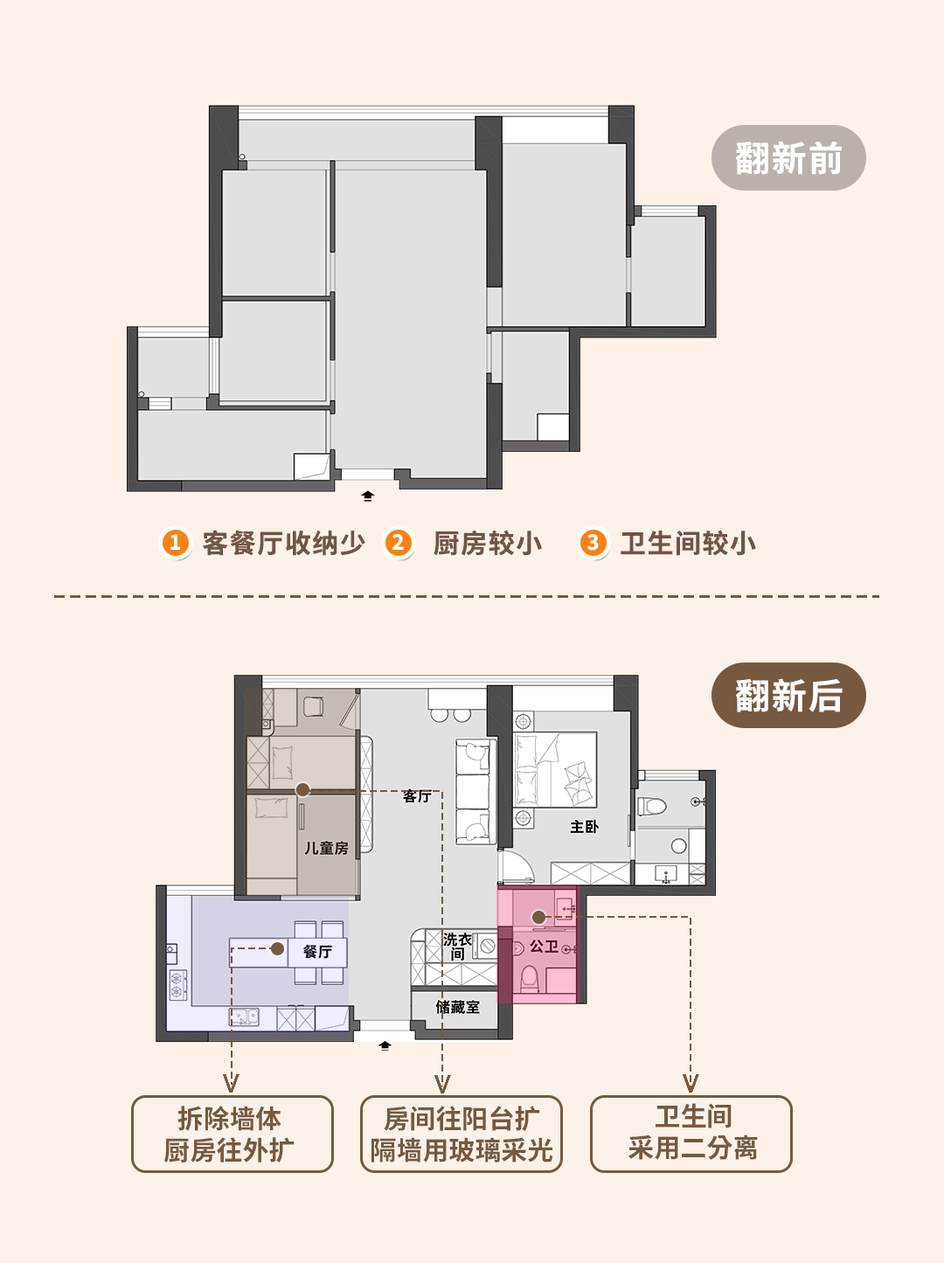
<style>
.page{position:relative;width:944px;height:1263px;background:#fcf2e9}
.page>*{position:absolute;margin:0}
.t1{font:35px "SourceHanSansSC-Bold";letter-spacing:0.05em;color:#ffffff}
.t2{font:26.2px "SourceHanSansSC-Bold";letter-spacing:0.05em;color:#705548}
.t3{font:20.9px "SourceHanSansSC-Bold";letter-spacing:0.05em;color:#ffffff}
.t4{font:26.2px "SourceHanSansSC-Bold";color:#755941}
</style>
<div class="page">
<p class="t1" style="left:735px;top:141px;width:107px;height:34px">翻新前</p>
<p class="t2" style="left:203px;top:530px;width:162px;height:26px">客餐厅收纳少</p>
<p class="t2" style="left:434px;top:530px;width:108px;height:26px">厨房较小</p>
<p class="t2" style="left:621px;top:530px;width:135px;height:26px">卫生间较小</p>
<p class="t3" style="left:170px;top:534px;width:10px;height:16px">1</p>
<p class="t3" style="left:392px;top:534px;width:12px;height:16px">2</p>
<p class="t3" style="left:587px;top:534px;width:12px;height:17px">3</p>
<p class="t1" style="left:735px;top:678px;width:108px;height:34px">翻新后</p>
<p class="t4" style="left:164px;top:1106px;width:131px;height:57px;text-align:center">拆除墙体<br>厨房往外扩</p>
<p class="t4" style="left:372px;top:1106px;width:180px;height:57px;text-align:center">房间往阳台扩<br>隔墙用玻璃采光</p>
<p class="t4" style="left:628px;top:1103px;width:130px;height:57px;text-align:center">卫生间<br>采用二分离</p>
</div>
